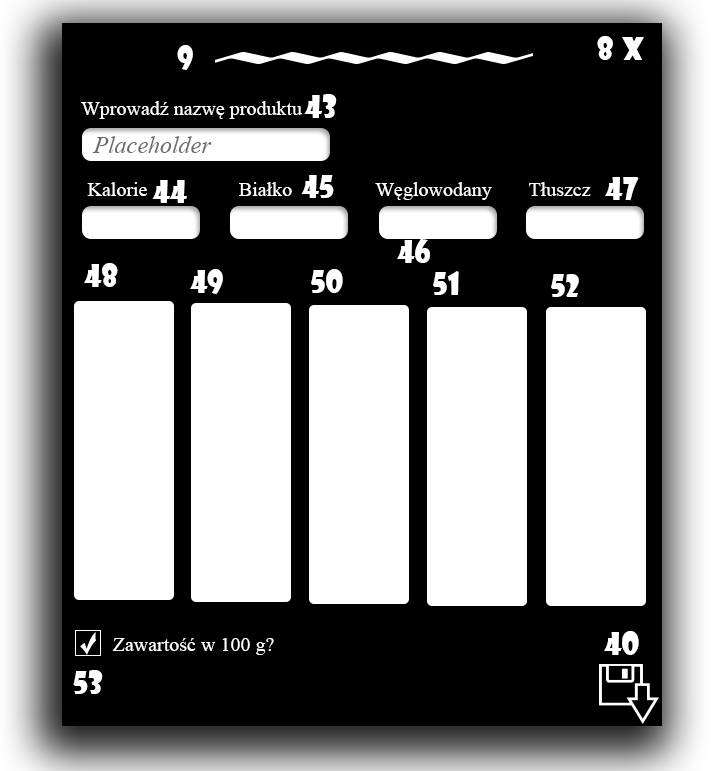
<style>
.page{position:relative;width:716px;height:771px;background:#000000}
.page>*{position:absolute;margin:0}
.t1{font:30px "ShowcardGothic-Reg";color:#ffffff}
.t2{font:30px "ShowcardGothic-Reg";color:#fffefe}
.t3{font:20px "TimesNewRomanPSMT";color:#ffffff}
.t4{font:24px "TimesNewRomanPS-ItalicMT";color:#6b6a6a}
</style>
<div class="page">
<p class="t1" style="left:597px;top:36px;width:16px;height:24px">8</p>
<p class="t2" style="left:622px;top:37px;width:22px;height:23px">x</p>
<p class="t1" style="left:177px;top:45px;width:16px;height:25px">9</p>
<p class="t3" style="left:81px;top:101px;width:221px;height:18px">Wprowadź nazwę produktu</p>
<p class="t1" style="left:304px;top:94px;width:33px;height:24px">43</p>
<p class="t4" style="left:92px;top:136px;width:120px;height:17px">Placeholder</p>
<p class="t3" style="left:87px;top:182px;width:60px;height:14px">Kalorie</p>
<p class="t1" style="left:152px;top:180px;width:35px;height:23px">44</p>
<p class="t3" style="left:239px;top:182px;width:53px;height:14px">Białko</p>
<p class="t1" style="left:301px;top:175px;width:33px;height:23px">45</p>
<p class="t3" style="left:375px;top:182px;width:117px;height:18px">Węglowodany</p>
<p class="t3" style="left:529px;top:182px;width:62px;height:14px">Tłuszcz</p>
<p class="t1" style="left:605px;top:177px;width:34px;height:24px">47</p>
<p class="t1" style="left:397px;top:239px;width:33px;height:24px">46</p>
<p class="t1" style="left:84px;top:263px;width:34px;height:24px">48</p>
<p class="t1" style="left:190px;top:269px;width:33px;height:25px">49</p>
<p class="t1" style="left:311px;top:269px;width:32px;height:24px">50</p>
<p class="t1" style="left:433px;top:271px;width:26px;height:24px">51</p>
<p class="t1" style="left:551px;top:274px;width:28px;height:23px">52</p>
<p class="t3" style="left:112px;top:638px;width:162px;height:17px">Zawartość w 100 g?</p>
<p class="t1" style="left:604px;top:631px;width:35px;height:24px">40</p>
<p class="t1" style="left:73px;top:670px;width:30px;height:24px">53</p>
</div>
